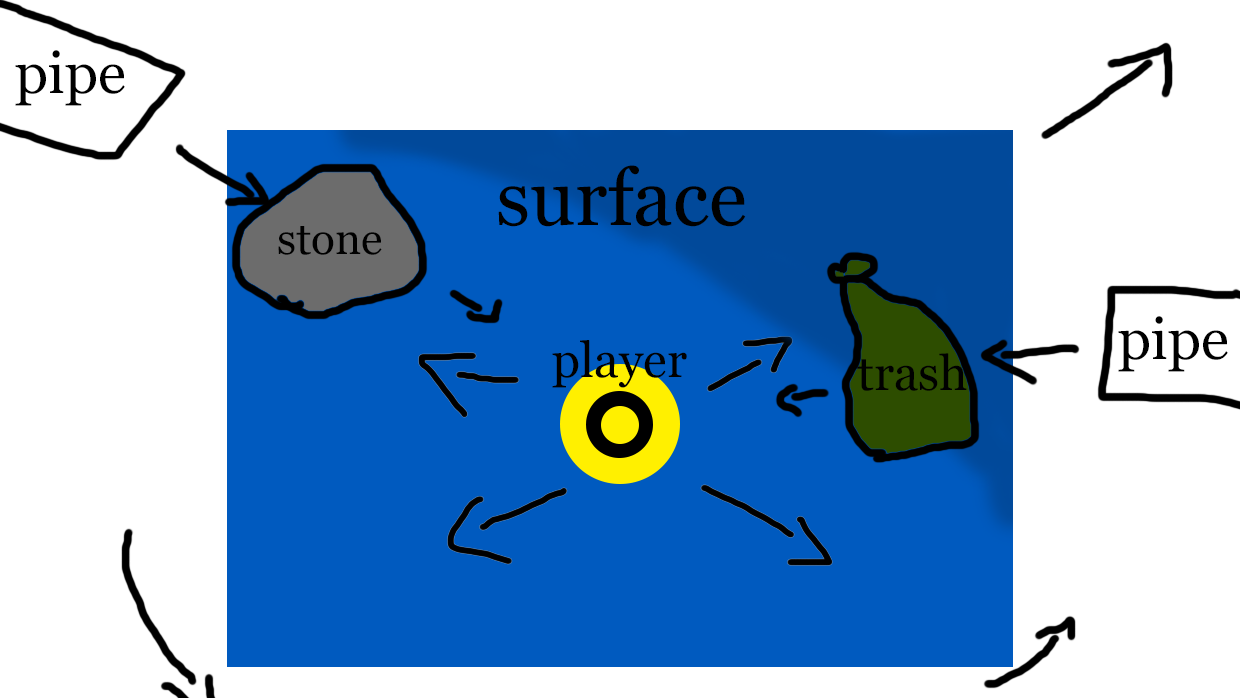
<style>
.page{position:relative;width:1240px;height:698px;background:#ffffff}
.page>*{position:absolute;margin:0}
.t1{font:57.8px "Georgia";color:#000000}
.t2{font:78.8px "Georgia";color:#000000}
.t3{font:44.3px "Georgia";color:#000000}
.t4{font:49px "Georgia";color:#000000}
.t5{font:48.7px "Georgia";color:#000000}
</style>
<div class="page">
<p class="t1" style="left:15px;top:50px;width:110px;height:56px">pipe</p>
<p class="t2" style="left:498px;top:165px;width:248px;height:62px">surface</p>
<p class="t3" style="left:278px;top:226px;width:104px;height:29px">stone</p>
<p class="t1" style="left:1118px;top:316px;width:110px;height:56px">pipe</p>
<p class="t4" style="left:552px;top:340px;width:135px;height:48px">player</p>
<p class="t5" style="left:857px;top:353px;width:110px;height:38px">trash</p>
</div>
